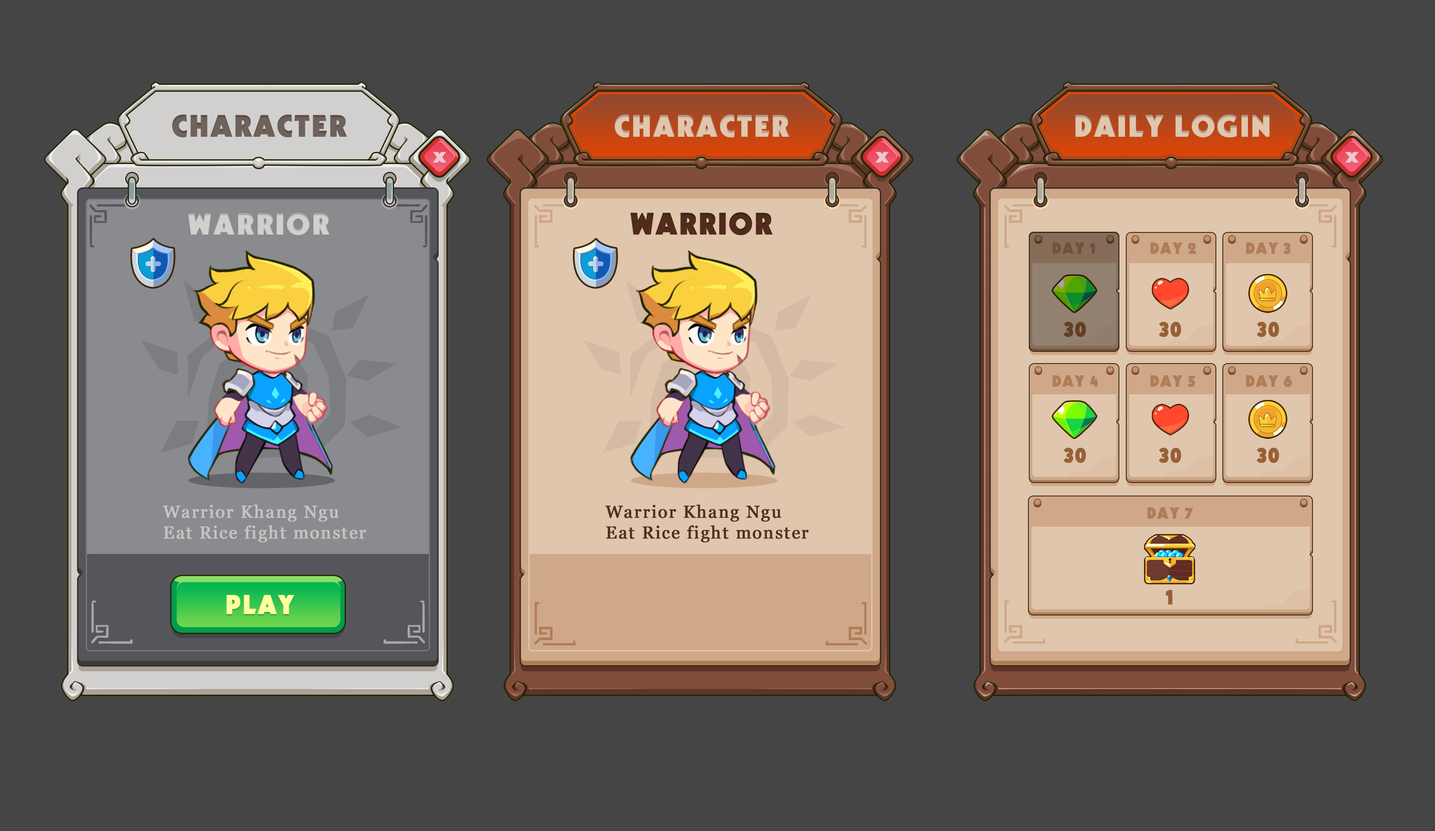
<style>
.page{position:relative;width:1435px;height:831px;background:#454545}
.page>*{position:absolute;margin:0}
.t1{font:29.5px "UTM-Kabel-KT";letter-spacing:0.06em;color:#6f625a;font-weight:bold}
.t2{font:29.5px "UTM-Kabel-KT";letter-spacing:0.06em;color:#e0c6ad;font-weight:bold}
.t3{font:14.4px "UTM-Kabel-KT";letter-spacing:0.06em;color:#eec7ce;font-weight:bold;scale:1.38 1}
.t4{font:29.5px "UTM-Kabel-KT";letter-spacing:0.06em;color:#d1d0ce;font-weight:bold}
.t5{font:29.5px "UTM-Kabel-KT";letter-spacing:0.06em;color:#512c1e;font-weight:bold}
.t6{font:15.6px "UTM-Kabel-KT";letter-spacing:0.06em;color:#725139;font-weight:bold}
.t7{font:15.6px "UTM-Kabel-KT";letter-spacing:0.06em;color:#af7d58;font-weight:bold}
.t8{font:20.8px "UTM-Kabel-KT";letter-spacing:0.06em;color:#623e23;font-weight:bold}
.t9{font:20.8px "UTM-Kabel-KT";letter-spacing:0.06em;color:#976036;font-weight:bold}
.t10{font:17.3px "Georgia";letter-spacing:0.06em;color:#c7c4c2;font-weight:bold}
.t11{font:17.3px "Georgia";letter-spacing:0.06em;color:#512c1e;font-weight:bold}
</style>
<div class="page">
<p class="t1" style="left:172px;top:114px;width:175px;height:24px">CHARACTER</p>
<p class="t2" style="left:614px;top:114px;width:175px;height:24px">CHARACTER</p>
<p class="t2" style="left:1075px;top:114px;width:194px;height:24px">DAILY LOGIN</p>
<p class="t3" style="left:433px;top:152px;width:13px;height:11px">X</p>
<p class="t3" style="left:875px;top:152px;width:14px;height:11px">X</p>
<p class="t4" style="left:188px;top:212px;width:142px;height:23px">WARRIOR</p>
<p class="t4" style="left:188px;top:212px;width:142px;height:23px">WARRIOR</p>
<p class="t5" style="left:630px;top:212px;width:142px;height:23px">WARRIOR</p>
<p class="t5" style="left:630px;top:212px;width:142px;height:23px">WARRIOR</p>
<p class="t6" style="left:1052px;top:242px;width:43px;height:12px">DAY 1</p>
<p class="t7" style="left:1150px;top:242px;width:46px;height:12px">DAY 2</p>
<p class="t7" style="left:1246px;top:242px;width:44px;height:12px">DAY 3</p>
<p class="t8" style="left:1063px;top:322px;width:23px;height:15px">30</p>
<p class="t9" style="left:1158px;top:322px;width:23px;height:15px">30</p>
<p class="t9" style="left:1256px;top:322px;width:23px;height:15px">30</p>
<p class="t7" style="left:1052px;top:375px;width:45px;height:12px">DAY 4</p>
<p class="t7" style="left:1150px;top:375px;width:45px;height:12px">DAY 5</p>
<p class="t7" style="left:1246px;top:375px;width:46px;height:12px">DAY 6</p>
<p class="t10" style="left:163px;top:504px;width:203px;height:39px">Warrior Khang Ngu<br>Eat Rice fight monster</p>
<p class="t11" style="left:605px;top:504px;width:204px;height:39px">Warrior Khang Ngu<br>Eat Rice fight monster</p>
<p class="t7" style="left:1147px;top:507px;width:46px;height:12px">DAY 7</p>
<p class="t9" style="left:1165px;top:590px;width:7px;height:15px">1</p>
</div>
